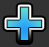
<style>
.page{position:relative;width:49px;height:47px;background:#333333}
.page>*{position:absolute;margin:0}
.t1{font:72px "FranklinGotT-Regu";font-weight:bold}
</style>
<div class="page">
<p class="t1" style="left:6px;top:6px;width:37px;height:35px">+</p>
</div>
